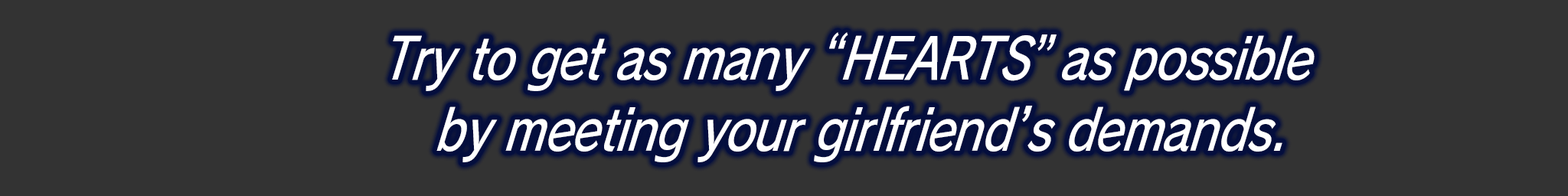
<style>
.page{position:relative;width:1568px;height:196px;background:#333333}
.page>*{position:absolute;margin:0}
.t1{font:58.7px "RodinPro-DB";letter-spacing:-0.02em;color:#ffffff;scale:0.8 1}
</style>
<div class="page">
<p class="t1" style="left:392px;top:32px;width:923px;height:59px">Try to get as many “HEARTS” as possible</p>
<p class="t1" style="left:436px;top:106px;width:846px;height:56px">by meeting your girlfriend’s demands.</p>
</div>
